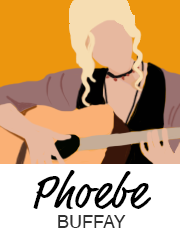
<style>
.page{position:relative;width:180px;height:240px;background:#ffffff}
.page>*{position:absolute;margin:0}
.t1{font:48px "MarketPro";color:#000000}
.t2{font:18px "Helvetica";color:#313131;text-transform:uppercase}
</style>
<div class="page">
<p class="t1" style="left:33px;top:170px;width:118px;height:39px">Phoebe</p>
<p class="t2" style="left:58px;top:215px;width:68px;height:13px">Buffay</p>
</div>
